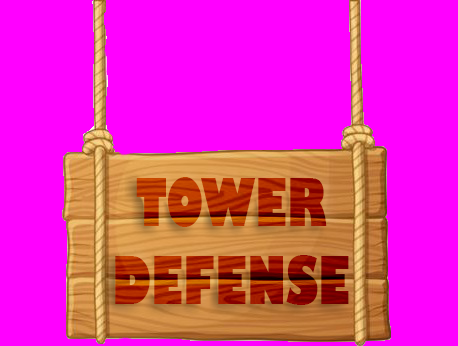
<style>
.page{position:relative;width:458px;height:346px;background:#ff00ff}
.page>*{position:absolute;margin:0}
.t1{font:65px "GillSans-UltraBoldCondensed"}
</style>
<div class="page">
<p class="t1" style="left:115px;top:177px;width:234px;height:128px;text-align:center">TOWER<br>DEFENSE</p>
</div>
